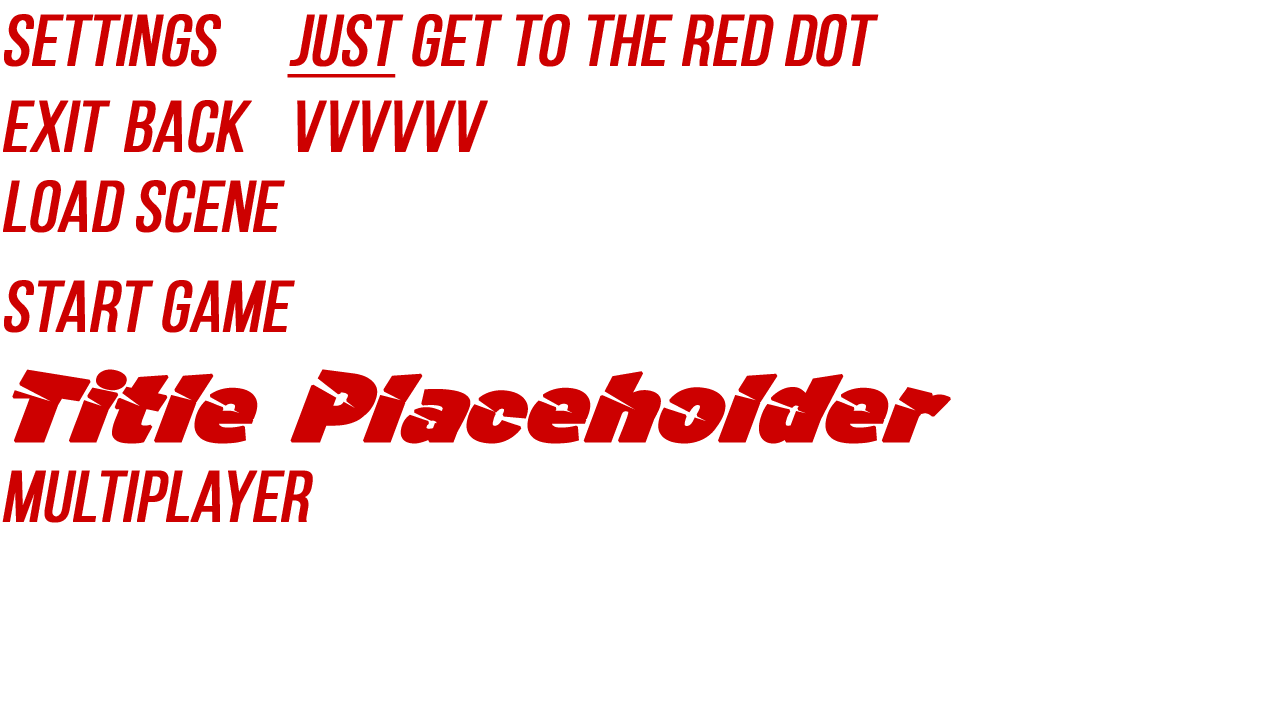
<style>
.page{position:relative;width:1280px;height:720px;background:#ffffff}
.page>*{position:absolute;margin:0}
.t1{font:72px "BebasNeueRegular";color:#cd0000;font-weight:bold;font-style:italic}
.t2{font:72px "BebasNeueRegular";color:#cd0000;font-weight:bold;font-style:italic;text-decoration:underline}
.t3{font:102px "A-Cuchillada";color:#cd0000;font-weight:bold;font-style:italic}
</style>
<div class="page">
<p class="t1" style="left:4px;top:14px;width:217px;height:53px">Settings</p>
<p class="t1" style="left:287px;top:14px;width:592px;height:64px"><span class="t2">Just</span> Get to the red dot</p>
<p class="t1" style="left:3px;top:100px;width:108px;height:52px">Exit</p>
<p class="t1" style="left:124px;top:100px;width:128px;height:53px">Back</p>
<p class="t1" style="left:297px;top:100px;width:191px;height:52px">vvvvvv</p>
<p class="t1" style="left:3px;top:180px;width:282px;height:53px">Load Scene</p>
<p class="t1" style="left:4px;top:280px;width:291px;height:53px">Start Game</p>
<p class="t3" style="left:12px;top:369px;width:939px;height:75px">Title Placeholder</p>
<p class="t1" style="left:2px;top:470px;width:311px;height:53px">MultiPlayer</p>
</div>
